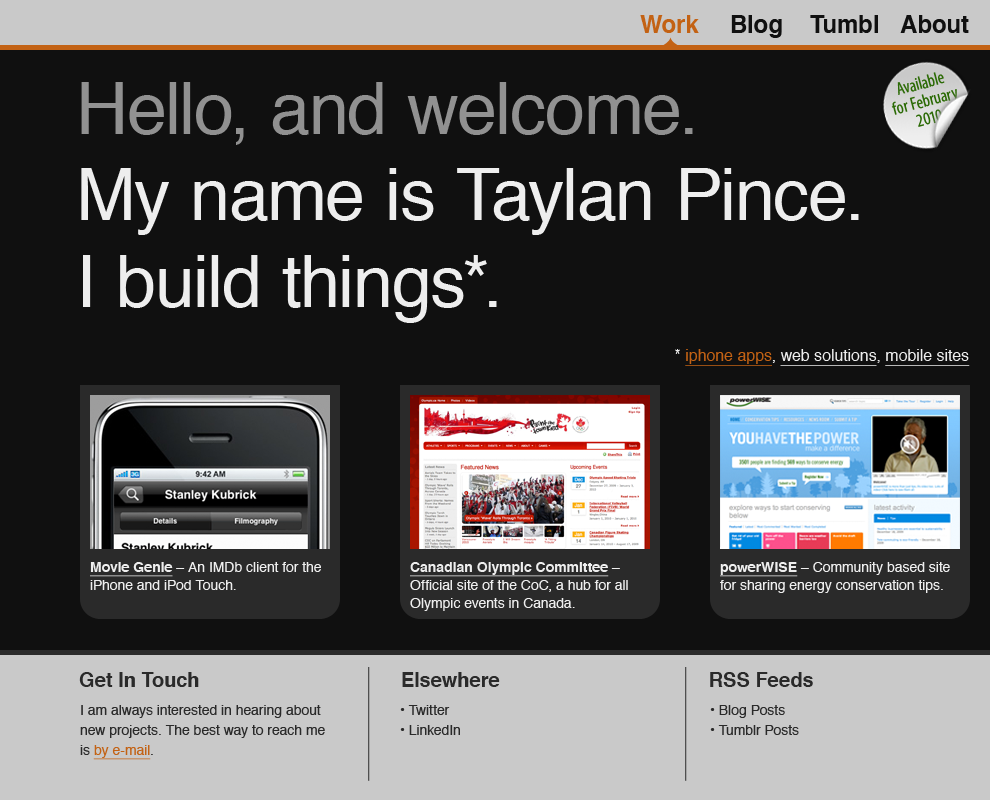
<style>
.page{position:relative;width:990px;height:800px;background:#101010}
.page>*{position:absolute;margin:0}
.t1{font:24px "Helvetica-Bold";color:#c36214}
.t2{font:24px "Helvetica-Bold";color:#101010}
.t3{font:18px/18px "MyriadPro-Cond";color:#2b6a05}
.t4{font:72px "Helvetica";color:#eeeeee}
.t5{font:72px "Helvetica";color:#919191}
.t6{font:16px "Helvetica";color:#eeeeee;text-decoration:underline}
.t7{font:16px "Helvetica";color:#eeeeee}
.t8{font:16px "Helvetica";color:#c36214;text-decoration:underline}
.t9{font:14px/18px "Helvetica";color:#eeeeee}
.t10{font:14px/18px "Helvetica-Bold";color:#eeeeee;text-decoration:underline}
.t11{font:20px "Helvetica-Bold";color:#2a2a2a}
.t12{font:14px/20px "Helvetica";color:#2a2a2a}
.t13{font:14px/20px "Helvetica";color:#c36214;text-decoration:underline}
</style>
<div class="page">
<p class="t1" style="left:640px;top:15px;width:59px;height:18px">Work</p>
<p class="t2" style="left:731px;top:15px;width:51px;height:23px">Blog</p>
<p class="t2" style="left:810px;top:15px;width:68px;height:18px">Tumbl</p>
<p class="t2" style="left:900px;top:15px;width:69px;height:18px">About</p>
<p class="t3" style="left:891px;top:72px;width:66px;height:55px;text-align:center;rotate:-15deg">Available<br>for February<br>2010</p>
<p class="t4" style="left:81px;top:82px;width:778px;height:241px"><span class="t5">Hello, and welcome.<br></span>My name is Taylan Pince.<br>I build things*.</p>
<p class="t6" style="left:675px;top:349px;width:295px;height:17px"><span class="t7">* </span><span class="t8">iphone apps</span><span class="t7">, </span>web solutions<span class="t7">, </span>mobile sites</p>
<p class="t9" style="left:90px;top:562px;width:231px;height:28px"><span class="t10">Movie Genie</span> – An IMDb client for the <br>iPhone and iPod Touch.</p>
<p class="t9" style="left:410px;top:562px;width:218px;height:49px"><span class="t10">Canadian Olympic Committee</span> – <br>Official site of the CoC, a hub for all<br>Olympic events in Canada.</p>
<p class="t9" style="left:720px;top:562px;width:230px;height:31px"><span class="t10">powerWISE</span> – Community based site <br>for sharing energy conservation tips.</p>
<p class="t11" style="left:79px;top:672px;width:120px;height:15px">Get In Touch</p>
<p class="t11" style="left:402px;top:672px;width:98px;height:15px">Elsewhere</p>
<p class="t11" style="left:710px;top:672px;width:103px;height:15px">RSS Feeds</p>
<p class="t12" style="left:80px;top:705px;width:245px;height:55px">I am always interested in hearing about<br>new projects. The best way to reach me <br>is <span class="t13">by e-mail</span>.</p>
<p class="t12" style="left:400px;top:705px;width:60px;height:30px">• Twitter<br>• LinkedIn</p>
<p class="t12" style="left:710px;top:705px;width:89px;height:30px">• Blog Posts<br>• Tumblr Posts</p>
</div>
